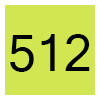
<style>
.page{position:relative;width:100px;height:100px;background:#d2e652}
.page>*{position:absolute;margin:0}
.t1{font:50px "MicrosoftSansSerif";color:#000407}
</style>
<div class="page">
<p class="t1" style="left:10px;top:34px;width:80px;height:38px">512</p>
</div>
